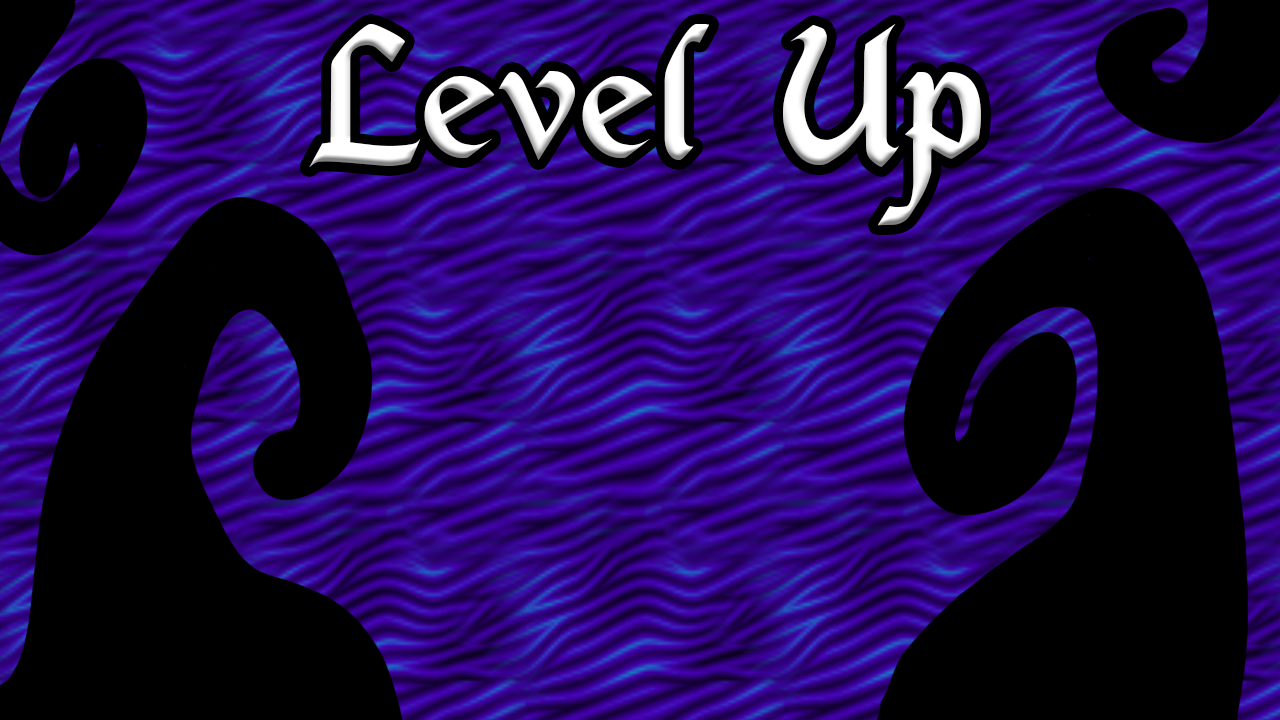
<style>
.page{position:relative;width:1280px;height:720px;background:#000000}
.page>*{position:absolute;margin:0}
.t1{font:200px "DS_Mysticora";color:#ffffff}
</style>
<div class="page">
<p class="t1" style="left:309px;top:24px;width:672px;height:202px">Level Up</p>
</div>
